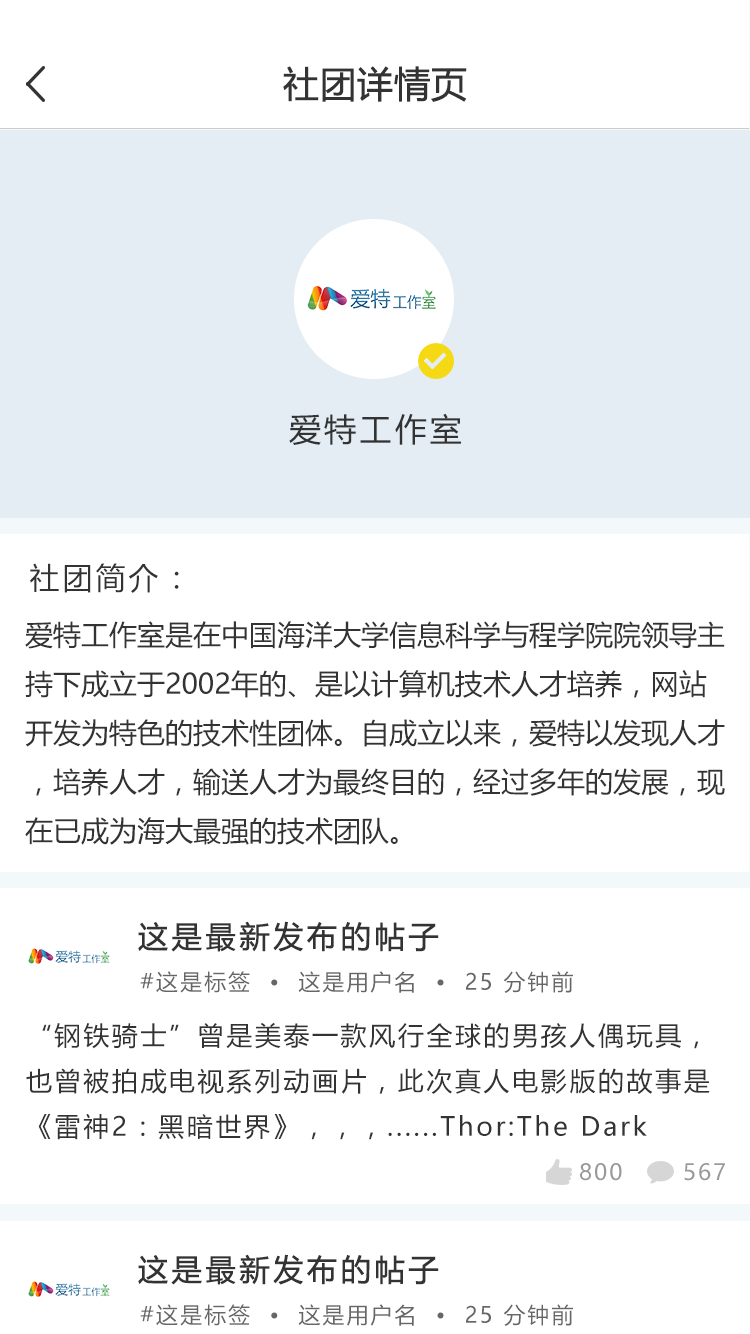
<style>
.page{position:relative;width:750px;height:1334px;background:#ffffff}
.page>*{position:absolute;margin:0}
.t1{font:36px "MicrosoftYaHei";color:#333333;font-weight:bold}
.t2{font:32px "MicrosoftYaHei";letter-spacing:0.1em;color:#333333}
.t3{font:30px "MicrosoftYaHei";letter-spacing:0.1em;color:#333333}
.t4{font:28px "MicrosoftYaHei";color:#333333}
.t5{font:30px "MicrosoftYaHei";letter-spacing:0.1em;color:#333333;font-weight:bold}
.t6{font:22px "MicrosoftYaHei";letter-spacing:0.1em;color:#666666}
.t7{font:26px "MicrosoftYaHei";letter-spacing:0.1em;color:#333333}
.t8{font:22px "MicrosoftYaHei";letter-spacing:0.1em;color:#999999}
</style>
<div class="page">
<p class="t1" style="left:283px;top:66px;width:184px;height:36px">社团详情页</p>
<p class="t2" style="left:289px;top:413px;width:172px;height:32px">爱特工作室</p>
<p class="t3" style="left:30px;top:563px;width:149px;height:30px">社团简介：</p>
<p class="t4" style="left:25px;top:621px;width:700px;height:224px">爱特工作室是在中国海洋大学信息科学与程学院院领导主持下成立于2002年的、是以计算机技术人才培养，网站开发为特色的技术性团体。自成立以来，爱特以发现人才，培养人才，输送人才为最终目的，经过多年的发展，现在已成为海大最强的技术团队。</p>
<p class="t5" style="left:138px;top:921px;width:301px;height:31px">这是最新发布的帖子</p>
<p class="t6" style="left:140px;top:971px;width:433px;height:22px">#这是标签  •  这是用户名  •  25 分钟前</p>
<p class="t7" style="left:26px;top:1022px;width:684px;height:118px">“钢铁骑士”曾是美泰一款风行全球的男孩人偶玩具，也曾被拍成电视系列动画片，此次真人电影版的故事是《雷神2：黑暗世界》，，，......Thor:The Dark World）编剧克里斯托弗·约斯特（Christopher Yost）原创的。</p>
<p class="t8" style="left:580px;top:1163px;width:42px;height:18px">800</p>
<p class="t8" style="left:684px;top:1163px;width:41px;height:18px">567</p>
<p class="t5" style="left:138px;top:1254px;width:301px;height:31px">这是最新发布的帖子</p>
<p class="t6" style="left:140px;top:1304px;width:433px;height:22px">#这是标签  •  这是用户名  •  25 分钟前</p>
</div>
